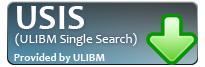
<style>
.page{position:relative;width:205px;height:67px}
.page>*{position:absolute;margin:0}
.t1{font:35.2px "Candara-Bold";color:#ffffff}
.t2{font:12.9px "Candara";color:#ffffff}
.t3{font:11.1px "Candara-Bold";color:#ffffff}
</style>
<div class="page">
<p class="t1" style="left:17px;top:6px;width:67px;height:23px">USIS</p>
<p class="t2" style="left:15px;top:33px;width:122px;height:13px">(ULIBM Single Search)</p>
<p class="t3" style="left:14px;top:53px;width:91px;height:10px">Provided by ULIBM</p>
</div>
